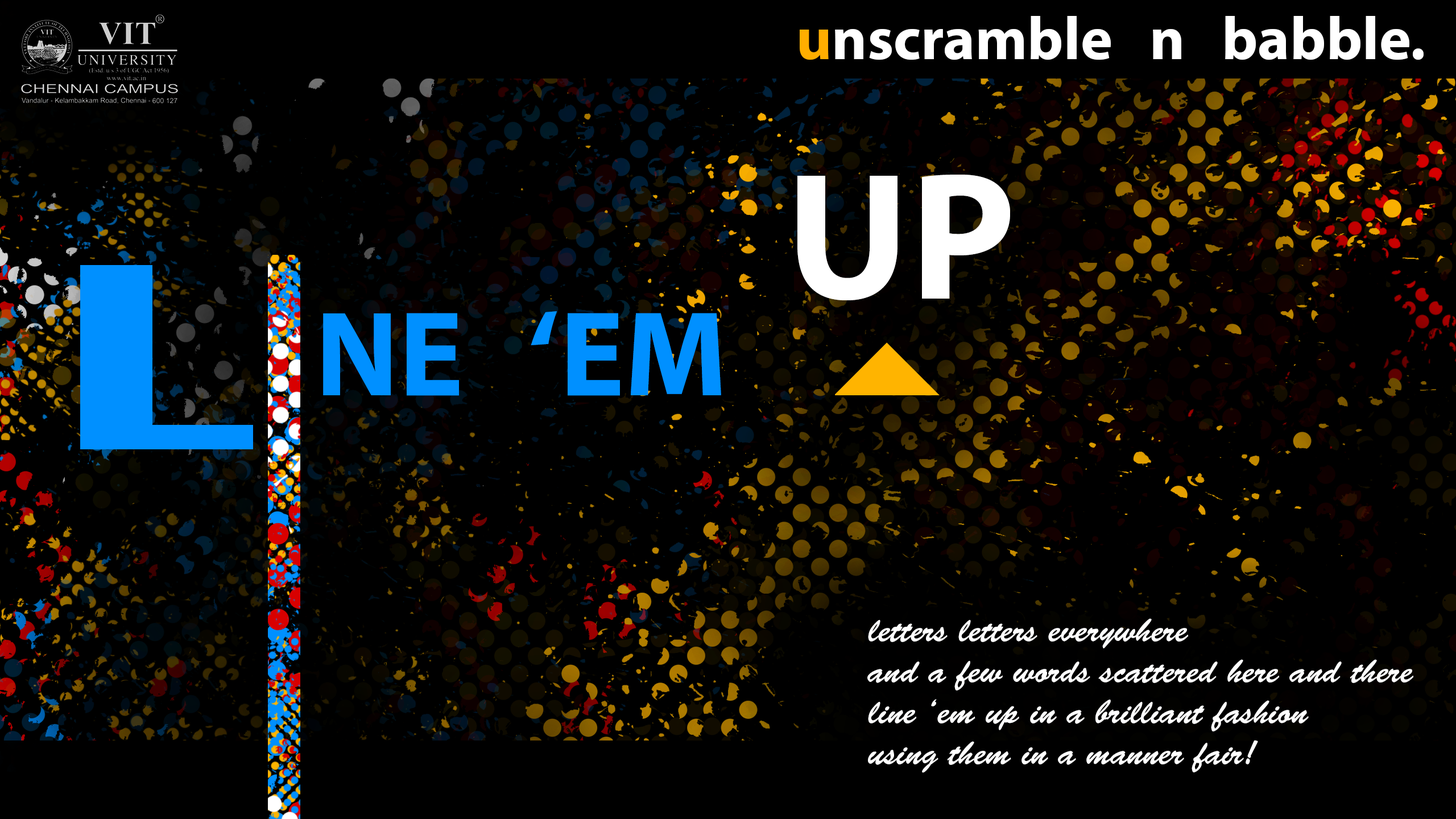
<style>
.page{position:relative;width:1456px;height:819px;background:#000000}
.page>*{position:absolute;margin:0}
.t1{font:60.7px "MyriadPro-Bold";color:#ffffff}
.t2{font:60.7px "MyriadPro-Bold";color:#ffae00}
.t3{font:182px "MyriadPro-Bold";color:#ffffff}
.t4{font:121.3px "MyriadPro-Bold";color:#0090ff}
.t5{font:34.1px "BrushScriptStd";color:#ffffff}
</style>
<div class="page">
<p class="t1" style="left:800px;top:16px;width:624px;height:44px"><span class="t2">u</span>nscramble   n   babble.</p>
<p class="t3" style="left:797px;top:175px;width:213px;height:125px">UP</p>
<p class="t4" style="left:323px;top:311px;width:398px;height:85px">NE   ‘EM</p>
<p class="t5" style="left:867px;top:618px;width:547px;height:155px">letters letters everywhere<br>and a few words scattered here and there<br>line ‘em up in a brilliant fashion<br>using them in a manner fair!</p>
</div>
